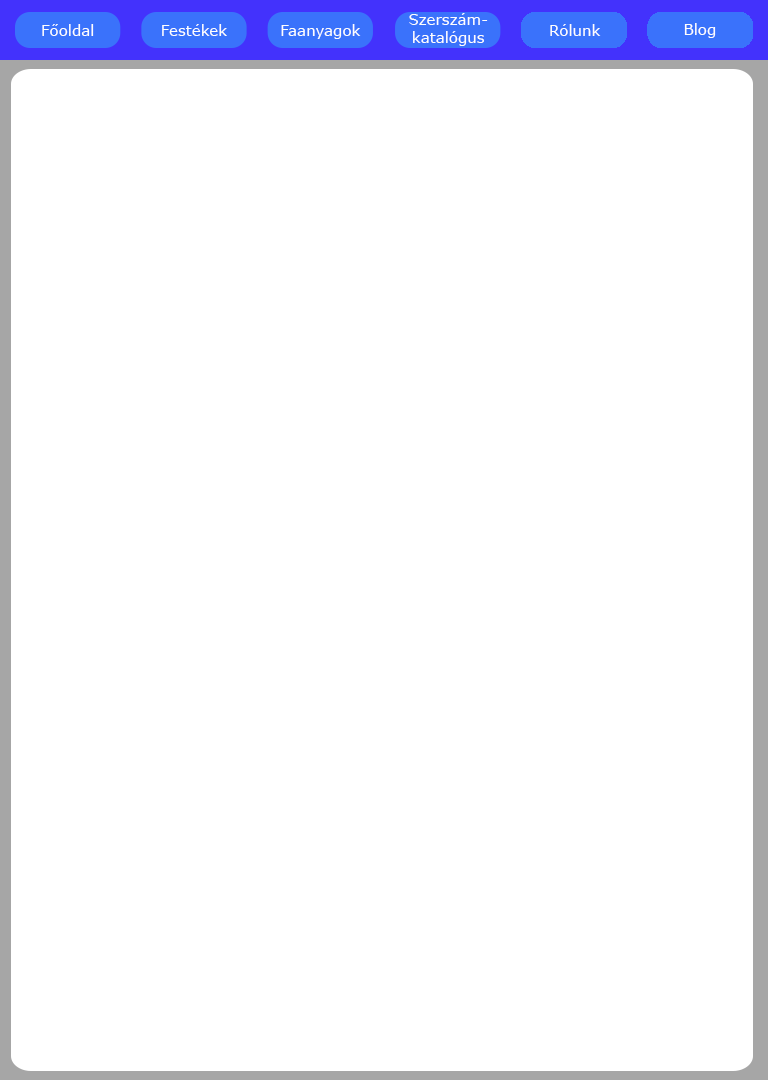
<style>
.page{position:relative;width:768px;height:1080px;background:#ffffff}
.page>*{position:absolute;margin:0}
.t1{font:15px "Verdana";color:#fefefe}
</style>
<div class="page">
<p class="t1" style="left:409px;top:13px;width:79px;height:33px;text-align:center">Szerszám-<br>katalógus</p>
<p class="t1" style="left:42px;top:24px;width:52px;height:12px">Főoldal</p>
<p class="t1" style="left:162px;top:24px;width:65px;height:12px">Festékek</p>
<p class="t1" style="left:281px;top:24px;width:80px;height:15px">Faanyagok</p>
<p class="t1" style="left:550px;top:24px;width:51px;height:12px">Rólunk</p>
<p class="t1" style="left:684px;top:23px;width:32px;height:15px">Blog</p>
</div>
